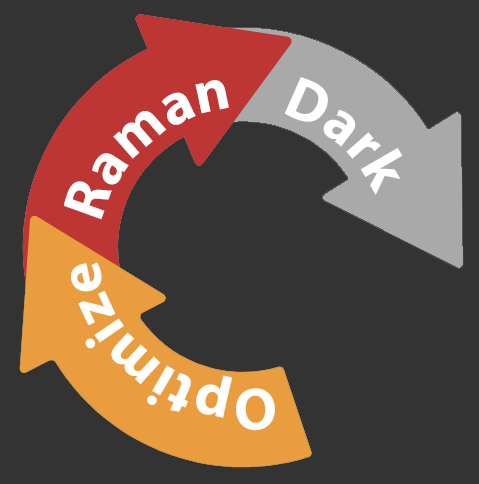
<style>
.page{position:relative;width:479px;height:484px;background:#333333}
.page>*{position:absolute;margin:0}
.t1{font:60px "MyriadPro-Bold";color:#ffffff}
</style>
<div class="page">
<p class="t1" style="left:63px;top:77px;width:340px;height:354px">Optimize   Raman    Dark</p>
</div>
